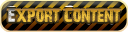
<style>
.page{position:relative;width:128px;height:32px}
.page>*{position:absolute;margin:0}
.t1{font:18.9px "28DaysLater";scale:0.91 1}
.t2{font:18.9px "28DaysLater";color:#e9ba3a;scale:0.91 1}
</style>
<div class="page">
<p class="t1" style="left:8px;top:8px;width:7px;height:14px">E</p>
<p class="t2" style="left:16px;top:7px;width:105px;height:16px">xport Content</p>
</div>
